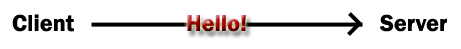
<style>
.page{position:relative;width:461px;height:49px;background:#ffffff}
.page>*{position:absolute;margin:0}
.t1{font:24px "FranklinGothic-Demi";color:#000000}
.t2{font:24px "FranklinGothic-Demi"}
</style>
<div class="page">
<p class="t1" style="left:12px;top:14px;width:62px;height:18px">Client</p>
<p class="t2" style="left:187px;top:15px;width:59px;height:17px">Hello!</p>
<p class="t1" style="left:380px;top:14px;width:67px;height:18px">Server</p>
</div>
